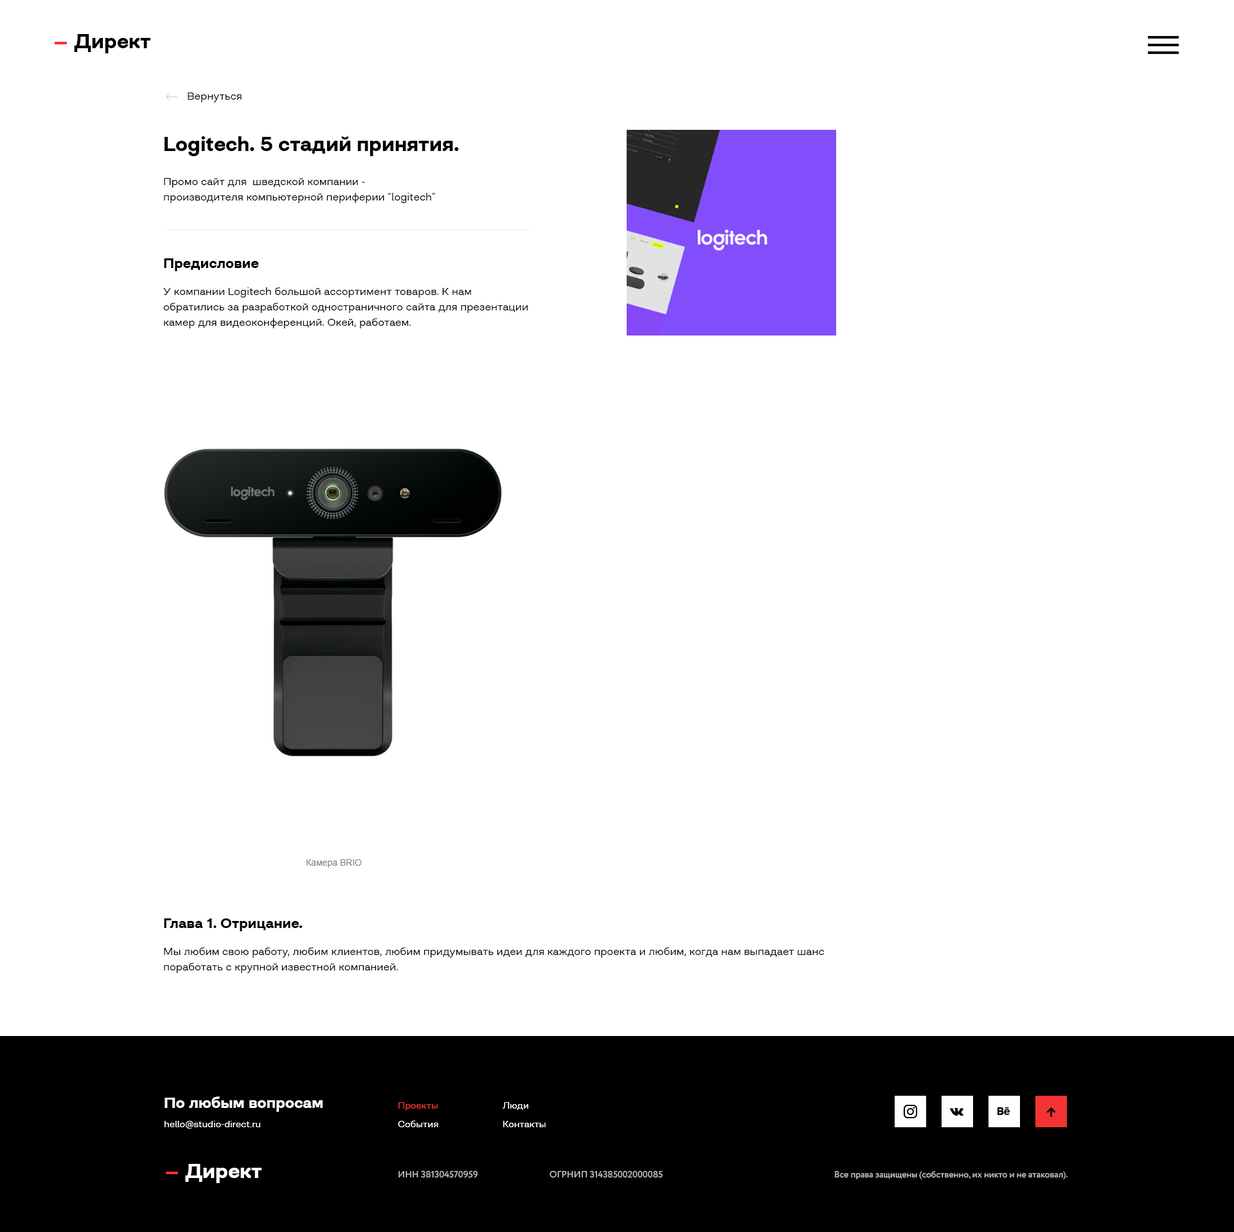
<style>
.page{position:relative;width:1234px;height:1232px;background:#ffffff}
.page>*{position:absolute;margin:0}
.t1{font:20.6px "Closer-Bold";color:#000000}
.t2{font:10.3px "Closer-Regular";color:#000000}
.t3{font:10.3px/15.4px "Closer-Regular";color:#000000}
.t4{font:14.1px "Closer-Bold";color:#000000}
.t5{font:15.4px "Closer-Bold";color:#ffffff}
.t6{font:9px "Closer-Regular";color:#f33333}
.t7{font:9px "Closer-Regular";color:#ffffff}
.t8{font:9px "Closer-Regular"}
.t9{font:20.6px "Closer-Bold";color:#ffffff}
.t10{font:9px "Circe-Regular";color:#c8c8c8}
</style>
<div class="page">
<p class="t1" style="left:74px;top:34px;width:76px;height:19px">Директ</p>
<p class="t2" style="left:188px;top:93px;width:54px;height:9px">Вернуться</p>
<p class="t1" style="left:165px;top:136px;width:294px;height:20px">Logitech. 5 стадий принятия.</p>
<p class="t3" style="left:164px;top:178px;width:271px;height:25px">Промо сайт для  шведской компании - <br>производителя компьютерной периферии “logitech”</p>
<p class="t4" style="left:164px;top:258px;width:95px;height:13px">Предисловие</p>
<p class="t3" style="left:163px;top:287px;width:365px;height:41px">У компании Logitech большой ассортимент товаров. К нам обратились за разработкой одностраничного сайта для презентации камер для видеоконференций. Окей, работаем.</p>
<p class="t4" style="left:164px;top:919px;width:138px;height:12px">Глава 1. Отрицание.</p>
<p class="t3" style="left:164px;top:948px;width:660px;height:25px">Мы любим свою работу, любим клиентов, любим придумывать идеи для каждого проекта и любим, когда нам выпадает шанс поработать с крупной известной компанией.</p>
<p class="t5" style="left:165px;top:1097px;width:158px;height:15px">По любым вопросам</p>
<p class="t5" style="left:165px;top:1097px;width:158px;height:15px">По любым вопросам</p>
<p class="t6" style="left:399px;top:1102px;width:39px;height:9px">Проекты</p>
<p class="t6" style="left:399px;top:1102px;width:39px;height:9px">Проекты</p>
<p class="t7" style="left:503px;top:1102px;width:25px;height:8px">Люди</p>
<p class="t7" style="left:503px;top:1102px;width:25px;height:8px">Люди</p>
<p class="t7" style="left:165px;top:1121px;width:95px;height:8px">hello@studio-direct.ru</p>
<p class="t7" style="left:165px;top:1121px;width:95px;height:8px">hello@studio-direct.ru</p>
<p class="t7" style="left:398px;top:1120px;width:40px;height:8px">События</p>
<p class="t8" style="left:399px;top:1121px;width:37px;height:7px">Новости</p>
<p class="t7" style="left:503px;top:1121px;width:43px;height:7px">Контакты</p>
<p class="t7" style="left:503px;top:1121px;width:43px;height:7px">Контакты</p>
<p class="t9" style="left:185px;top:1164px;width:77px;height:19px">Директ</p>
<p class="t9" style="left:185px;top:1164px;width:77px;height:19px">Директ</p>
<p class="t10" style="left:399px;top:1171px;width:79px;height:7px">ИНН 381304570959</p>
<p class="t10" style="left:399px;top:1171px;width:79px;height:7px">ИНН 381304570959</p>
<p class="t10" style="left:550px;top:1171px;width:113px;height:7px">ОГРНИП 314385002000085</p>
<p class="t10" style="left:550px;top:1171px;width:113px;height:7px">ОГРНИП 314385002000085</p>
<p class="t10" style="left:835px;top:1171px;width:233px;height:9px">Все права защищены (собственно, их никто и не атаковал).</p>
<p class="t10" style="left:835px;top:1171px;width:233px;height:9px">Все права защищены (собственно, их никто и не атаковал).</p>
</div>
